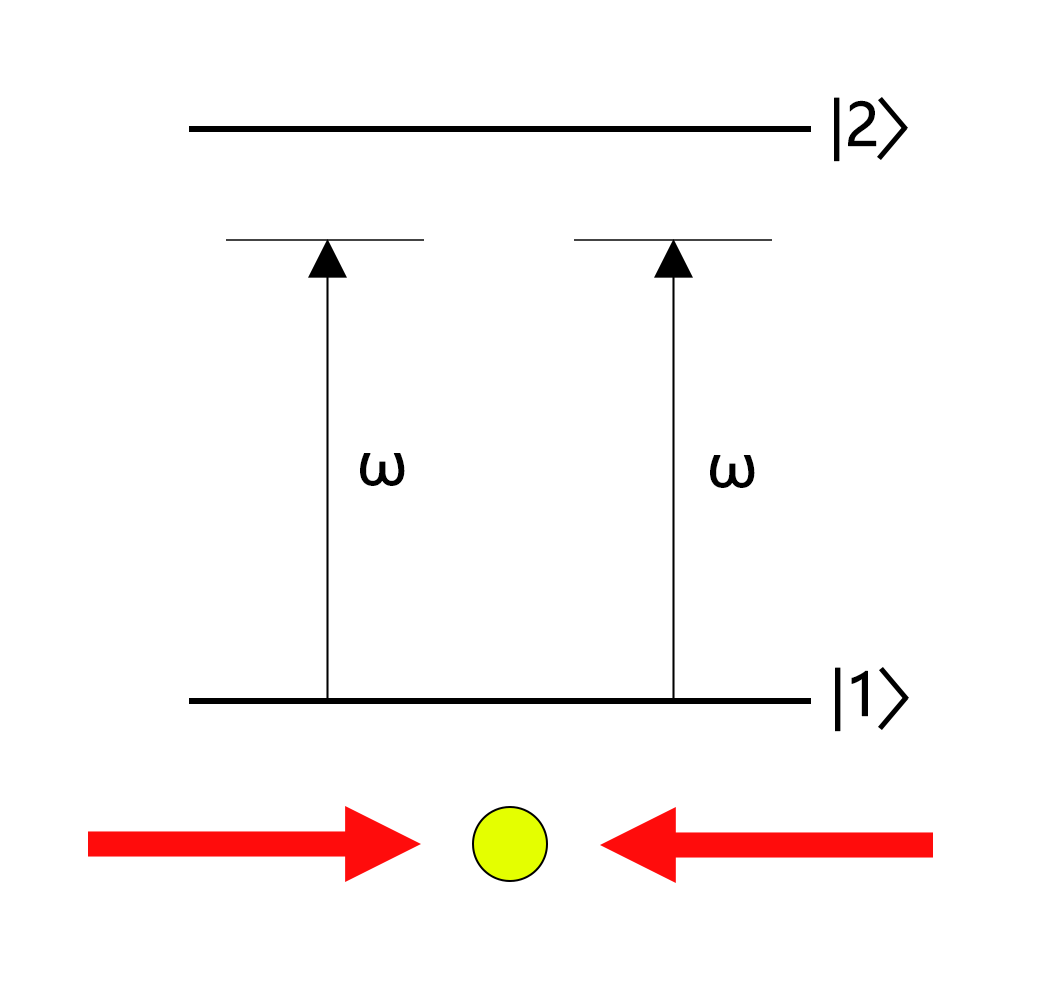
<style>
.page{position:relative;width:1061px;height:1000px;background:#ffffff}
.page>*{position:absolute;margin:0}
.t1{font:58.3px "MicrosoftYaHeiUI";letter-spacing:-0.02em;color:#000000;font-weight:bold}
</style>
<div class="page">
<p class="t1" style="left:834px;top:97px;width:43px;height:65px">|2</p>
<p class="t1" style="left:360px;top:453px;width:45px;height:33px">ω</p>
<p class="t1" style="left:710px;top:455px;width:45px;height:33px">ω</p>
<p class="t1" style="left:835px;top:667px;width:33px;height:65px">|1</p>
</div>
